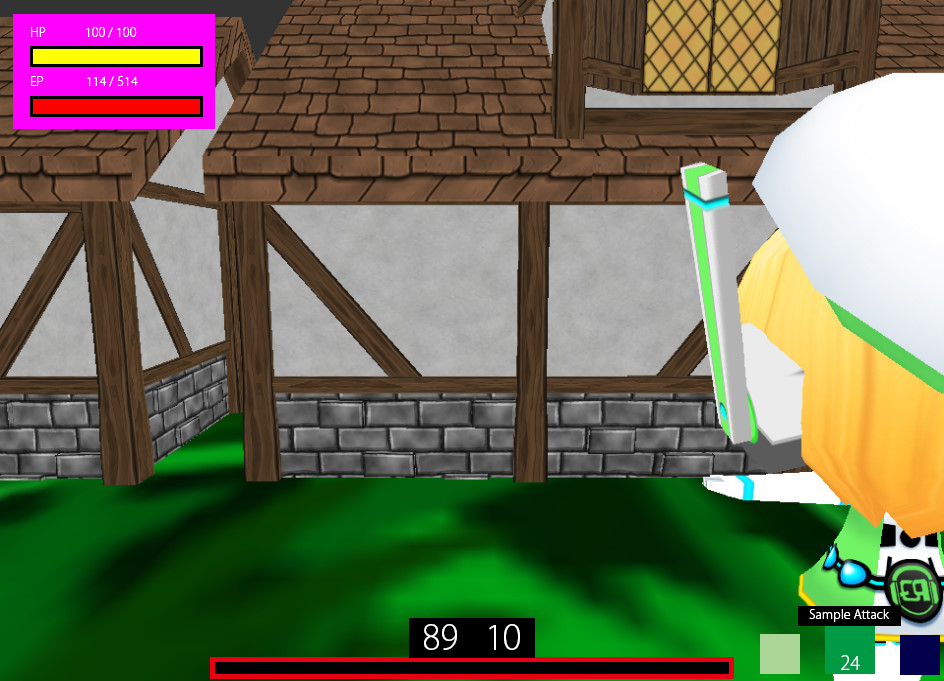
<style>
.page{position:relative;width:944px;height:681px}
.page>*{position:absolute;margin:0}
.t1{font:12.5px "KozGoPr6N-Light";color:#ffffff}
.t2{font:33.3px "KozGoPr6N-Light";color:#ffffff}
.t3{font:18.8px "KozGoPr6N-Light";color:#ffffff}
</style>
<div class="page">
<p class="t1" style="left:31px;top:27px;width:15px;height:10px">HP</p>
<p class="t1" style="left:86px;top:27px;width:51px;height:11px">100 / 100</p>
<p class="t1" style="left:31px;top:76px;width:13px;height:10px">EP</p>
<p class="t1" style="left:87px;top:76px;width:51px;height:11px">114 / 514</p>
<p class="t1" style="left:809px;top:609px;width:80px;height:13px">Sample Attack</p>
<p class="t2" style="left:424px;top:624px;width:33px;height:26px">89</p>
<p class="t2" style="left:489px;top:624px;width:31px;height:26px">10</p>
<p class="t3" style="left:841px;top:655px;width:19px;height:15px">24</p>
</div>
